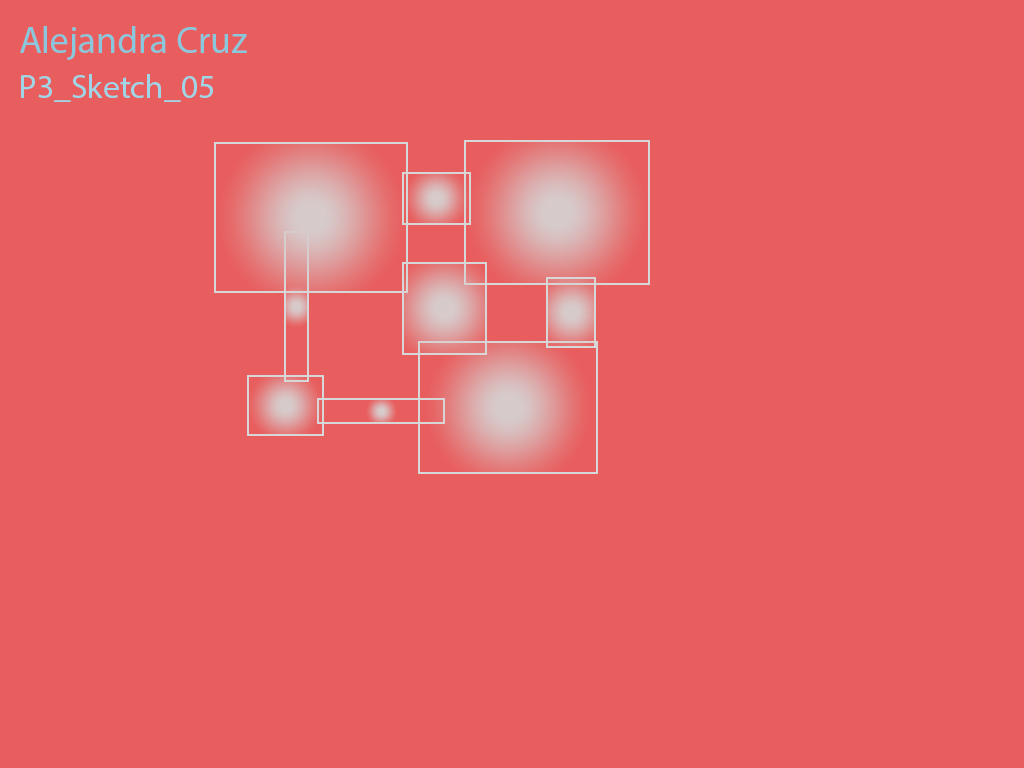
<style>
.page{position:relative;width:1024px;height:768px;background:#e85e5e}
.page>*{position:absolute;margin:0}
.t1{font:37.5px "MyriadPro-Regular";color:#89c8dc}
.t2{font:33.3px "MyriadPro-Regular";color:#9ed6e8}
</style>
<div class="page">
<p class="t1" style="left:20px;top:26px;width:227px;height:34px">Alejandra Cruz</p>
<p class="t2" style="left:21px;top:74px;width:192px;height:28px">P3_Sketch_05</p>
</div>
